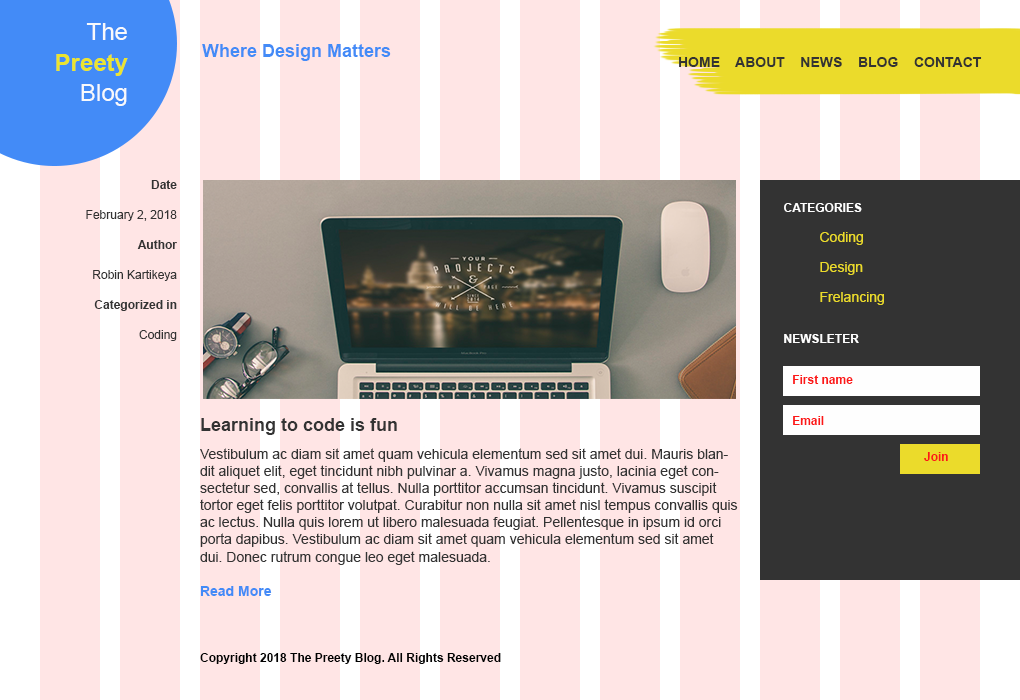
<style>
.page{position:relative;width:1020px;height:700px;background:#ffe5e5}
.page>*{position:absolute;margin:0}
.t1{font:24px/30.1px "Arial-BoldMT";color:#ebe42f}
.t2{font:24px/30.1px "ArialMT";color:#f8f9fb}
.t3{font:18px "Arial-BoldMT";color:#438bf7}
.t4{font:14px "Arial-BoldMT";color:#333333}
.t5{font:12px/30.1px "ArialMT";color:#333333}
.t6{font:12px/30.1px "Arial-BoldMT";color:#333333}
.t7{font:14px/30.1px "ArialMT";color:#ebdb2b}
.t8{font:12px/30.1px "Arial-BoldMT";color:#fefefe}
.t9{font:12px "Arial-BoldMT";color:#fefefe}
.t10{font:12px "Arial-BoldMT";color:#fc1818}
.t11{font:18px "Arial-BoldMT";color:#333333}
.t12{font:14px/17.1px "ArialMT";color:#333333}
.t13{font:14px/17.1px "Arial-BoldMT";color:#438bf7}
.t14{font:12px "Arial-BoldMT";color:#010101}
</style>
<div class="page">
<p class="t1" style="left:56px;top:23px;width:72px;height:83px"><span class="t2">The<br></span>Preety<br><span class="t2">Blog</span></p>
<p class="t3" style="left:202px;top:44px;width:189px;height:17px">Where Design Matters</p>
<p class="t4" style="left:679px;top:57px;width:303px;height:10px">HOME    ABOUT    NEWS    BLOG    CONTACT</p>
<p class="t5" style="left:86px;top:180px;width:91px;height:161px"><span class="t6">Date<br></span>February 2, 2018<br><span class="t6">Author<br></span>Robin Kartikeya<br><span class="t6">Categorized in<br></span>Coding</p>
<p class="t7" style="left:784px;top:203px;width:100px;height:102px;text-align:right"><span class="t8">CATEGORIES<br></span> Coding<br> Design<br> Frelancing</p>
<p class="t9" style="left:784px;top:334px;width:75px;height:9px">NEWSLETER</p>
<p class="t10" style="left:793px;top:375px;width:60px;height:9px">First name</p>
<p class="t11" style="left:201px;top:418px;width:196px;height:17px">Learning to code is fun</p>
<p class="t10" style="left:793px;top:416px;width:31px;height:9px">Email</p>
<p class="t12" style="left:200px;top:448px;width:538px;height:148px;text-align:right">Vestibulum ac diam sit amet quam vehicula elementum sed sit amet dui. Mauris blandit aliquet elit, eget tincidunt nibh pulvinar a. Vivamus magna justo, lacinia eget consectetur sed, convallis at tellus. Nulla porttitor accumsan tincidunt. Vivamus suscipit tortor eget felis porttitor volutpat. Curabitur non nulla sit amet nisl tempus convallis quis ac lectus. Nulla quis lorem ut libero malesuada feugiat. Pellentesque in ipsum id orci porta dapibus. Vestibulum ac diam sit amet quam vehicula elementum sed sit amet dui. Donec rutrum congue leo eget malesuada.<br><br><span class="t13">Read More</span></p>
<p class="t10" style="left:924px;top:452px;width:24px;height:9px">Join</p>
<p class="t14" style="left:200px;top:653px;width:301px;height:11px">Copyright 2018 The Preety Blog. All Rights Reserved</p>
</div>
